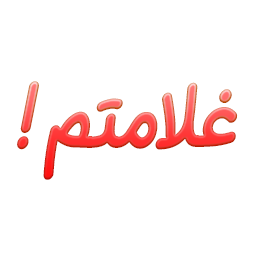
<style>
.page{position:relative;width:256px;height:256px;background:#ffffff}
.page>*{position:absolute;margin:0}
.t1{font:90.1px "IRANSansDNFaNum-Bold";letter-spacing:-0.06em;scale:0.84 1}
</style>
<div class="page">
<p class="t1" style="left:17px;top:81px;width:221px;height:99px">!  غلامتم</p>
</div>
